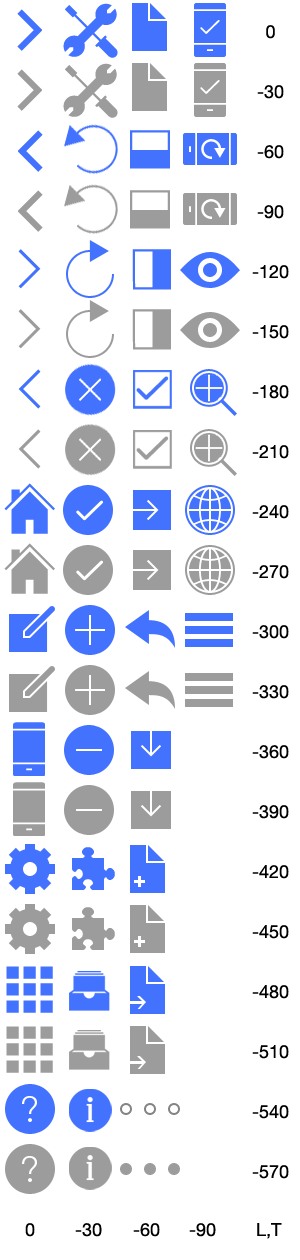
<style>
.page{position:relative;width:300px;height:1260px;background:#ffffff}
.page>*{position:absolute;margin:0}
.t1{font:18px/60px "HelveticaNeue";color:#000000}
.t2{font:18px "HelveticaNeue";color:#000000}
</style>
<div class="page">
<p class="t1" style="left:252px;top:25px;width:37px;height:1154px;text-align:center">0<br>-30<br>-60<br>-90<br>-120<br>-150<br>-180<br>-210<br>-240<br>-270<br>-300<br>-330<br>-360<br>-390<br>-420<br>-450<br>-480<br>-510<br>-540<br>-570</p>
<p class="t2" style="left:25px;top:1223px;width:257px;height:16px">0        -30 -60     -90    L,T</p>
</div>
